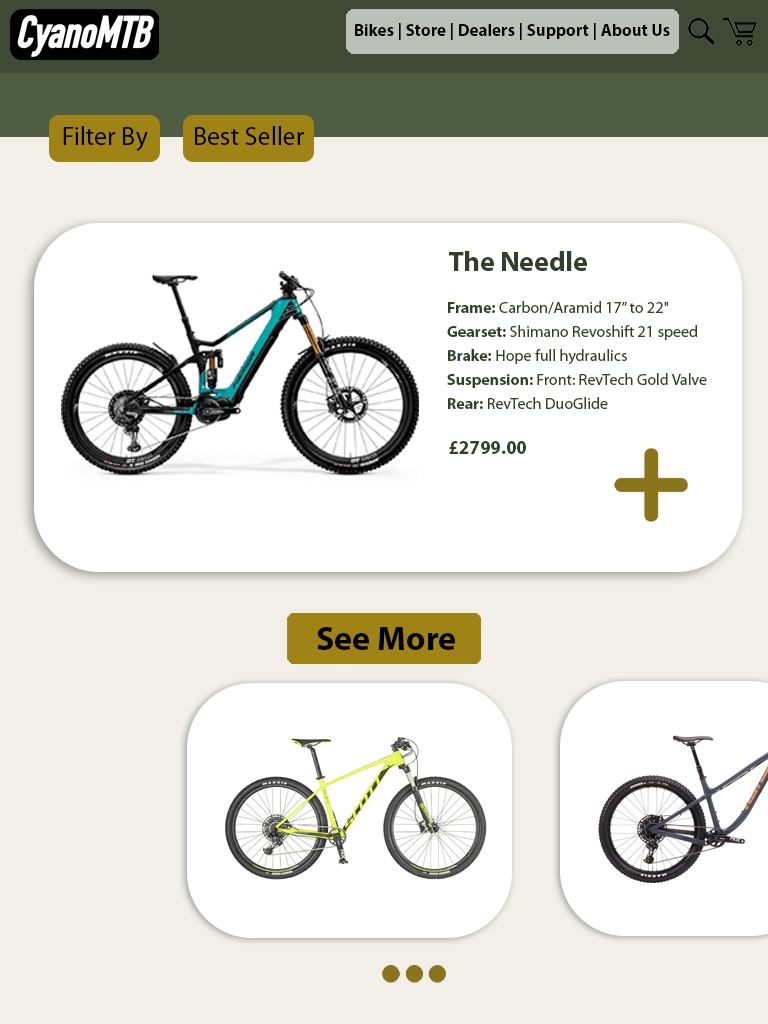
<style>
.page{position:relative;width:768px;height:1024px;background:#ffffff}
.page>*{position:absolute;margin:0}
.t1{font:17px "MyriadPro-Bold";color:#000000}
.t2{font:26px "MyriadPro-Regular";color:#000000}
.t3{font:28px "MyriadPro-Bold";color:#343f2b}
.t4{font:16px/24px "MyriadPro-Regular";color:#343f2b}
.t5{font:16px/24px "MyriadPro-Bold";color:#343f2b}
.t6{font:19px "MyriadPro-Bold";color:#343f2b}
.t7{font:34px "MyriadPro-Bold";color:#000000}
</style>
<div class="page">
<p class="t1" style="left:355px;top:23px;width:315px;height:17px">Bikes | Store | Dealers | Support | About Us</p>
<p class="t2" style="left:63px;top:126px;width:85px;height:25px">Filter By</p>
<p class="t2" style="left:195px;top:126px;width:109px;height:19px">Best Seller</p>
<p class="t3" style="left:449px;top:251px;width:138px;height:20px">The Needle</p>
<p class="t4" style="left:447px;top:301px;width:260px;height:108px"><span class="t5">Frame:</span> Carbon/Aramid 17” to 22"<br><span class="t5">Gearset: </span>Shimano Revoshift 21 speed<br><span class="t5">Brake:</span> Hope full hydraulics<br><span class="t5">Suspension: </span>Front: RevTech Gold Valve <br><span class="t5">Rear: </span>RevTech DuoGlide</p>
<p class="t6" style="left:449px;top:441px;width:77px;height:13px">£2799.00</p>
<p class="t7" style="left:317px;top:627px;width:138px;height:23px">See More</p>
</div>
